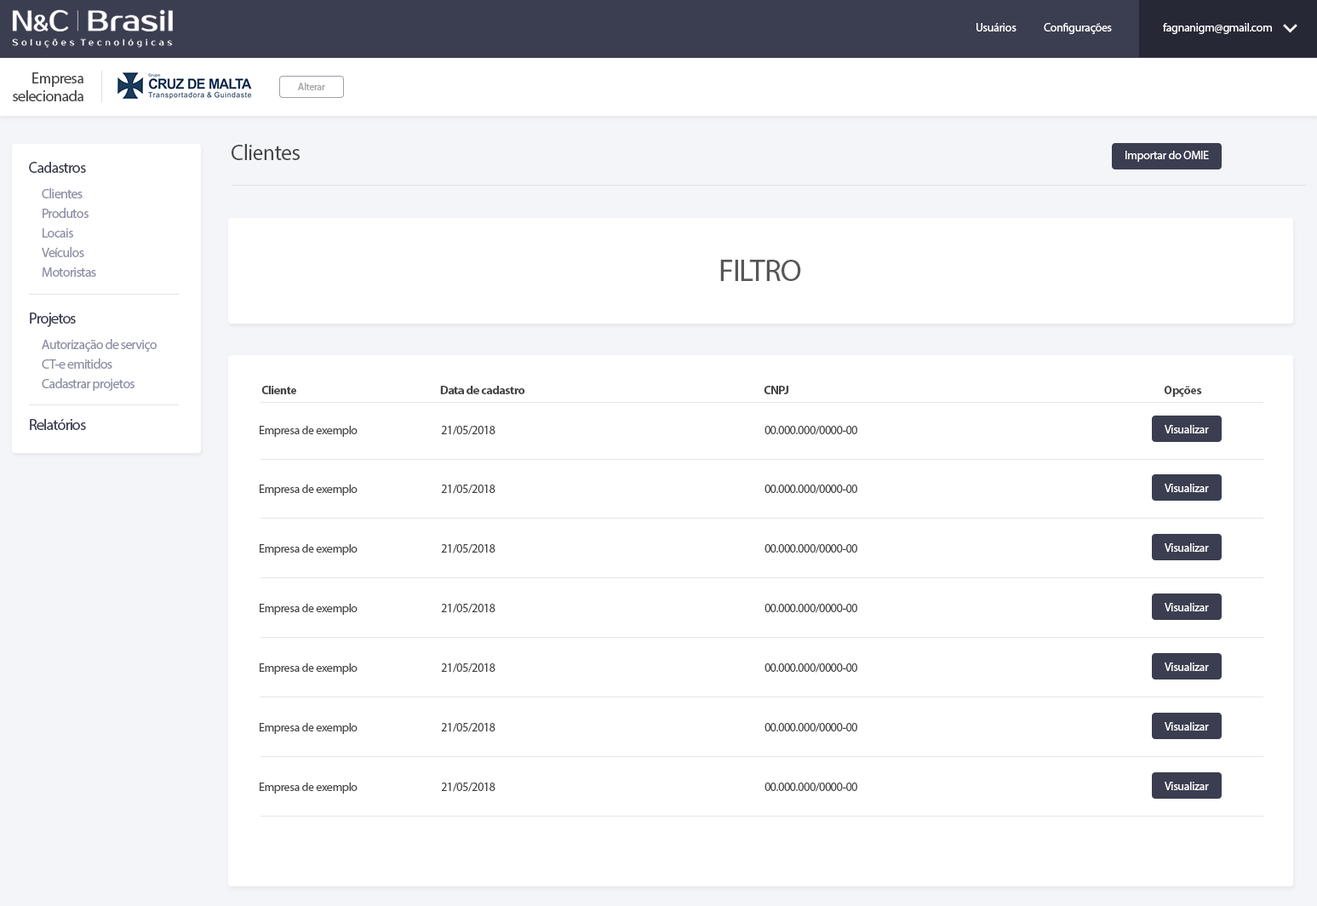
<style>
.page{position:relative;width:1317px;height:906px;background:#ffffff}
.page>*{position:absolute;margin:0}
.t1{font:11.9px "MyriadPro-Regular";letter-spacing:-0.025em;color:#ffffff}
.t2{font:15.3px/17.8px "MyriadPro-Regular";letter-spacing:-0.025em;color:#454545}
.t3{font:10.2px "MyriadPro-Regular";letter-spacing:-0.025em;color:#a2a2a2}
.t4{font:22.1px "MyriadPro-Regular";letter-spacing:-0.025em;color:#454545}
.t5{font:15.3px "MyriadPro-Regular";letter-spacing:-0.045em;color:#3b3e51}
.t6{font:13.6px "MyriadPro-Regular";letter-spacing:-0.045em;color:#8c8fa4}
.t7{font:30.6px "MyriadPro-Regular";letter-spacing:-0.025em;color:#575757}
.t8{font:13.6px "MyriadPro-Regular";letter-spacing:-0.045em;color:#8d90a5}
.t9{font:11.9px "MyriadPro-Bold";letter-spacing:-0.025em;color:#454545}
.t10{font:11.9px "MyriadPro-Regular";letter-spacing:-0.025em;color:#454545}
</style>
<div class="page">
<p class="t1" style="left:976px;top:23px;width:40px;height:8px">Usuários</p>
<p class="t1" style="left:1043px;top:23px;width:69px;height:11px">Configurações</p>
<p class="t1" style="left:1163px;top:23px;width:109px;height:11px">fagnanigm@gmail.com</p>
<p class="t2" style="left:13px;top:72px;width:70px;height:29px;text-align:right">Empresa<br>selecionada</p>
<p class="t3" style="left:298px;top:83px;width:27px;height:7px">Alterar</p>
<p class="t4" style="left:232px;top:144px;width:68px;height:16px">Clientes</p>
<p class="t5" style="left:29px;top:162px;width:57px;height:11px">Cadastros</p>
<p class="t1" style="left:1125px;top:151px;width:84px;height:11px">Importar do OMIE</p>
<p class="t6" style="left:42px;top:188px;width:41px;height:10px">Clientes</p>
<p class="t6" style="left:43px;top:208px;width:46px;height:10px">Produtos</p>
<p class="t6" style="left:43px;top:228px;width:30px;height:9px">Locais</p>
<p class="t6" style="left:42px;top:247px;width:42px;height:10px">Veículos</p>
<p class="t6" style="left:42px;top:267px;width:54px;height:10px">Motoristas</p>
<p class="t7" style="left:720px;top:260px;width:81px;height:21px">FILTRO</p>
<p class="t5" style="left:30px;top:312px;width:46px;height:15px">Projetos</p>
<p class="t8" style="left:42px;top:339px;width:115px;height:13px">Autorização de serviço</p>
<p class="t6" style="left:42px;top:358px;width:70px;height:11px">CT-e emitidos</p>
<p class="t6" style="left:42px;top:378px;width:92px;height:13px">Cadastrar projetos</p>
<p class="t9" style="left:261px;top:386px;width:35px;height:8px">Cliente</p>
<p class="t9" style="left:440px;top:386px;width:85px;height:8px">Data de cadastro</p>
<p class="t9" style="left:763px;top:386px;width:25px;height:8px">CNPJ</p>
<p class="t9" style="left:1164px;top:386px;width:38px;height:11px">Opções</p>
<p class="t5" style="left:30px;top:419px;width:56px;height:11px">Relatórios</p>
<p class="t10" style="left:260px;top:426px;width:97px;height:11px">Empresa de exemplo</p>
<p class="t10" style="left:441px;top:426px;width:54px;height:9px">21/05/2018</p>
<p class="t10" style="left:764px;top:426px;width:93px;height:9px">00.000.000/0000-00</p>
<p class="t1" style="left:1164px;top:425px;width:45px;height:8px">Visualizar</p>
<p class="t10" style="left:260px;top:484px;width:97px;height:11px">Empresa de exemplo</p>
<p class="t10" style="left:441px;top:484px;width:54px;height:10px">21/05/2018</p>
<p class="t10" style="left:764px;top:484px;width:93px;height:10px">00.000.000/0000-00</p>
<p class="t1" style="left:1164px;top:483px;width:45px;height:9px">Visualizar</p>
<p class="t10" style="left:260px;top:544px;width:97px;height:11px">Empresa de exemplo</p>
<p class="t10" style="left:441px;top:544px;width:54px;height:9px">21/05/2018</p>
<p class="t10" style="left:764px;top:544px;width:93px;height:9px">00.000.000/0000-00</p>
<p class="t1" style="left:1164px;top:543px;width:45px;height:9px">Visualizar</p>
<p class="t10" style="left:260px;top:603px;width:97px;height:12px">Empresa de exemplo</p>
<p class="t10" style="left:441px;top:603px;width:54px;height:10px">21/05/2018</p>
<p class="t10" style="left:764px;top:603px;width:93px;height:10px">00.000.000/0000-00</p>
<p class="t1" style="left:1164px;top:603px;width:45px;height:8px">Visualizar</p>
<p class="t10" style="left:260px;top:663px;width:97px;height:11px">Empresa de exemplo</p>
<p class="t10" style="left:441px;top:663px;width:54px;height:9px">21/05/2018</p>
<p class="t10" style="left:764px;top:663px;width:93px;height:9px">00.000.000/0000-00</p>
<p class="t1" style="left:1164px;top:662px;width:45px;height:9px">Visualizar</p>
<p class="t10" style="left:260px;top:723px;width:97px;height:11px">Empresa de exemplo</p>
<p class="t10" style="left:441px;top:723px;width:54px;height:9px">21/05/2018</p>
<p class="t10" style="left:764px;top:723px;width:93px;height:9px">00.000.000/0000-00</p>
<p class="t1" style="left:1164px;top:722px;width:45px;height:8px">Visualizar</p>
<p class="t10" style="left:260px;top:782px;width:97px;height:11px">Empresa de exemplo</p>
<p class="t10" style="left:441px;top:782px;width:54px;height:10px">21/05/2018</p>
<p class="t10" style="left:764px;top:782px;width:93px;height:10px">00.000.000/0000-00</p>
<p class="t1" style="left:1164px;top:781px;width:45px;height:9px">Visualizar</p>
</div>
